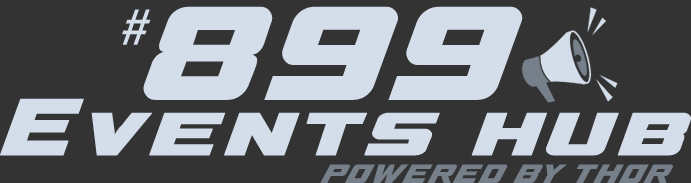
<style>
.page{position:relative;width:691px;height:183px;background:#333333}
.page>*{position:absolute;margin:0}
.t1{font:150px "A4SPEEDBold";letter-spacing:0.04em;color:#d4deea}
.t2{font:150px "Marons-Regular";letter-spacing:0.04em;color:#d4deea;font-style:italic}
.t3{font:90px "A4SPEEDBold";letter-spacing:0.04em;color:#d4deea;font-weight:bold}
.t4{font:30px "A4SPEEDBold";letter-spacing:0.04em;color:#76808a;font-style:italic}
</style>
<div class="page">
<p class="t1" style="left:122px;top:6px;width:401px;height:94px"><span class="t2">#</span>899</p>
<p class="t3" style="left:0px;top:98px;width:691px;height:58px">Events hub</p>
<p class="t4" style="left:320px;top:164px;width:353px;height:19px">POWERED BY THOR</p>
</div>
